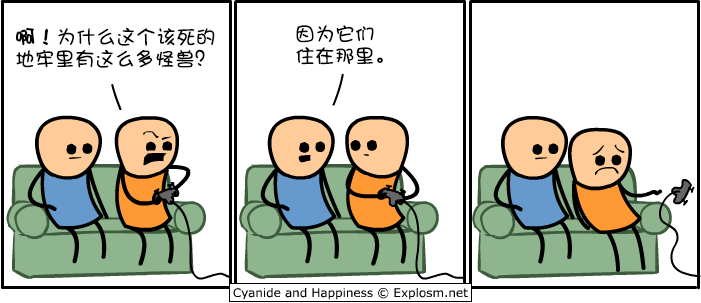
<style>
.page{position:relative;width:701px;height:303px;background:#ffffff}
.page>*{position:absolute;margin:0}
.t1{font:20px/22px "DFShaoNvW5";color:#000000}
.t2{font:20px/22px "DFShaoNvW5";color:#000000;font-weight:bold}
</style>
<div class="page">
<p class="t1" style="left:16px;top:27px;width:199px;height:41px"><span class="t2">啊！</span>为什么这个该死的<br>地牢里有这么多怪兽？</p>
<p class="t1" style="left:296px;top:25px;width:87px;height:40px">因为它们<br>住在那里。</p>
</div>
